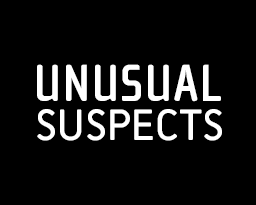
<style>
.page{position:relative;width:256px;height:205px;background:#000000}
.page>*{position:absolute;margin:0}
.t1{font:53.6px "ChollaSansBold";letter-spacing:0.005em;color:#ffffff}
.t2{font:44.9px "SciFly-Sans";color:#ffffff}
</style>
<div class="page">
<p class="t1" style="left:37px;top:64px;width:184px;height:38px">UNUSUAL</p>
<p class="t2" style="left:37px;top:109px;width:185px;height:32px">SUSPECTS</p>
</div>
